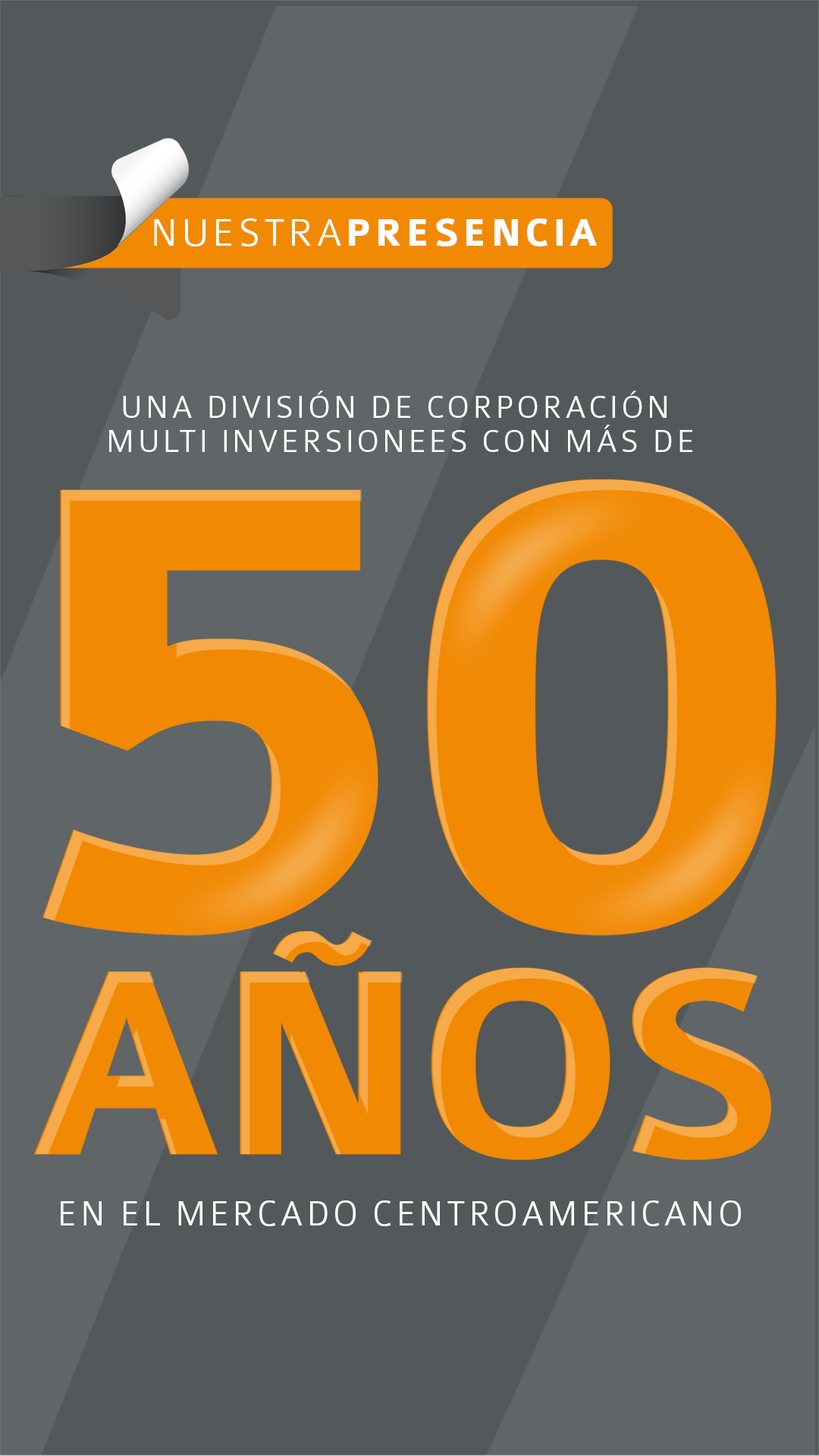
<style>
.page{position:relative;width:819px;height:1456px;background:#53585a}
.page>*{position:absolute;margin:0}
.t1{font:41.5px "Colaborate-Bold";letter-spacing:0.08em;color:#ffffff}
.t2{font:41.5px "Colaborate-Light";letter-spacing:0.08em;color:#ffffff}
.t3{font:33.9px/33.8px "Colaborate-Light";letter-spacing:0.08em;color:#ffffff}
.t4{font:33.9px/88.9px "Colaborate-Light";letter-spacing:0.08em;color:#ffffff}
.t5{font:37.1px "Colaborate-Light";letter-spacing:0.08em;color:#ffffff}
</style>
<div class="page">
<p class="t1" style="left:154px;top:218px;width:443px;height:28px"><span class="t2">NUESTRA</span>PRESENCIA</p>
<p class="t3" style="left:109px;top:391px;width:583px;height:61px;text-align:center"><span class="t4">U</span>NA DIVISIÓN DE CORPORACIÓN <br>MULTI INVERSIONEES CON MÁS DE</p>
<p class="t5" style="left:61px;top:1200px;width:680px;height:26px">EN EL MERCADO CENTROAMERICANO</p>
</div>
